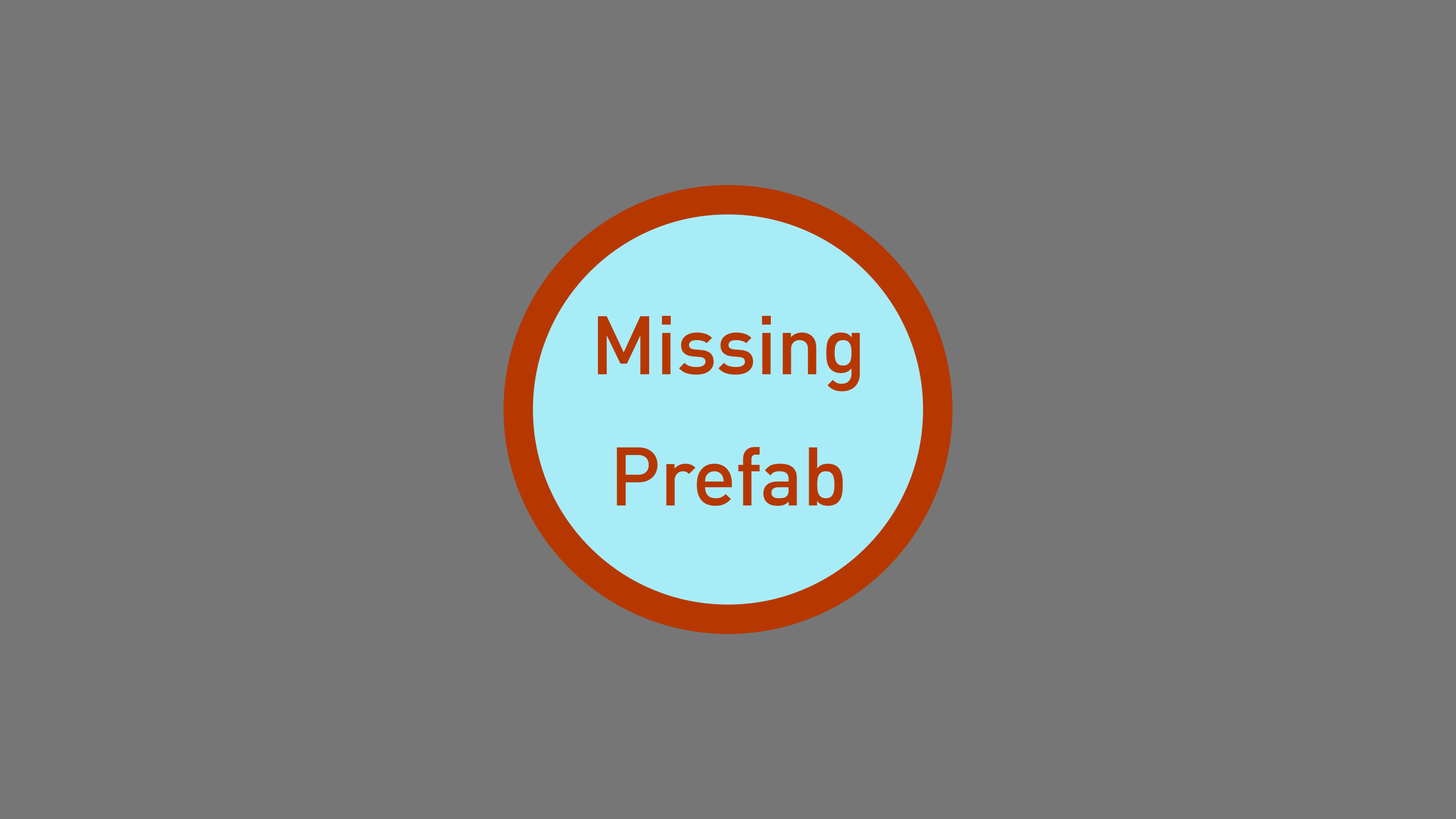
<style>
.page{position:relative;width:1456px;height:819px;background:#767676}
.page>*{position:absolute;margin:0}
.t1{font:81.5px/131.2px "HDADINOffice-Medium";color:#b63800}
</style>
<div class="page">
<p class="t1" style="left:598px;top:316px;width:262px;height:190px;text-align:center">Missing<br>Prefab</p>
</div>
